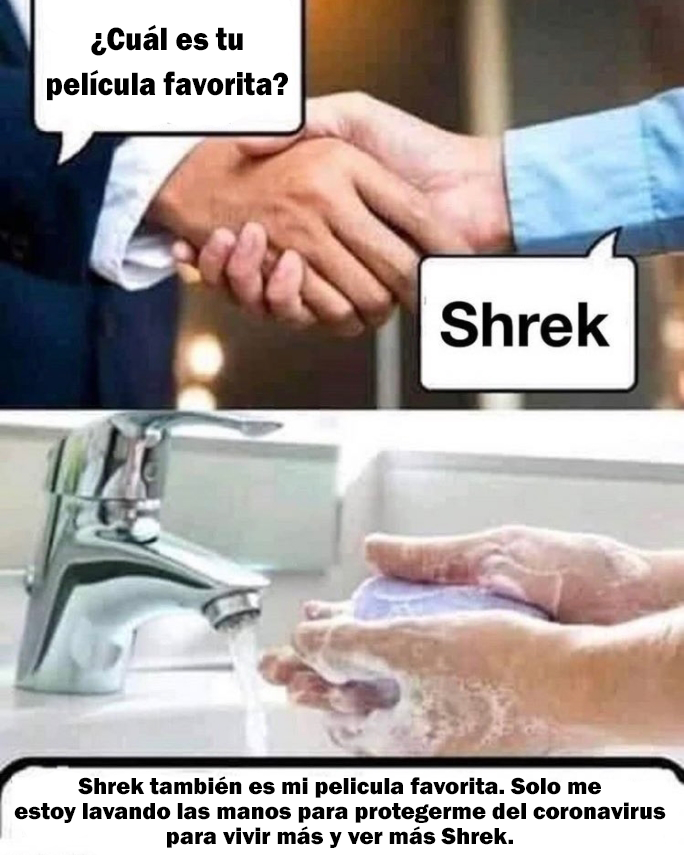
<style>
.page{position:relative;width:684px;height:855px}
.page>*{position:absolute;margin:0}
.t1{font:33.6px "FranklinGothic-Heavy";color:#000000;scale:0.88 1}
.t2{font:23.9px "FranklinGothic-Heavy";color:#000000}
</style>
<div class="page">
<p class="t1" style="left:47px;top:24px;width:241px;height:77px;text-align:center">¿Cuál es tu<br>película favorita?</p>
<p class="t2" style="left:14px;top:776px;width:652px;height:72px;text-align:center">Shrek también es mi pelicula favorita. Solo me<br>estoy lavando las manos para protegerme del coronavirus<br>para vivir más y ver más Shrek.</p>
</div>
